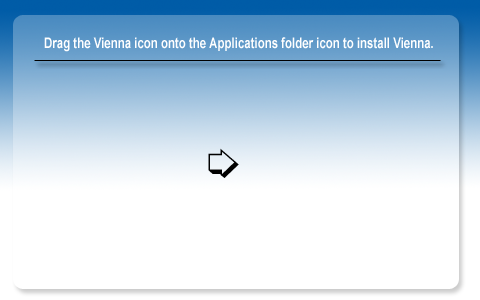
<style>
.page{position:relative;width:480px;height:300px;background:#ffffff}
.page>*{position:absolute;margin:0}
.t1{font:14.5px "Arial-BoldMT";color:#ffffff;scale:0.79 1}
</style>
<div class="page">
<p class="t1" style="left:44px;top:37px;width:389px;height:15px">Drag the Vienna icon onto the Applications folder icon to install Vienna.</p>
</div>
